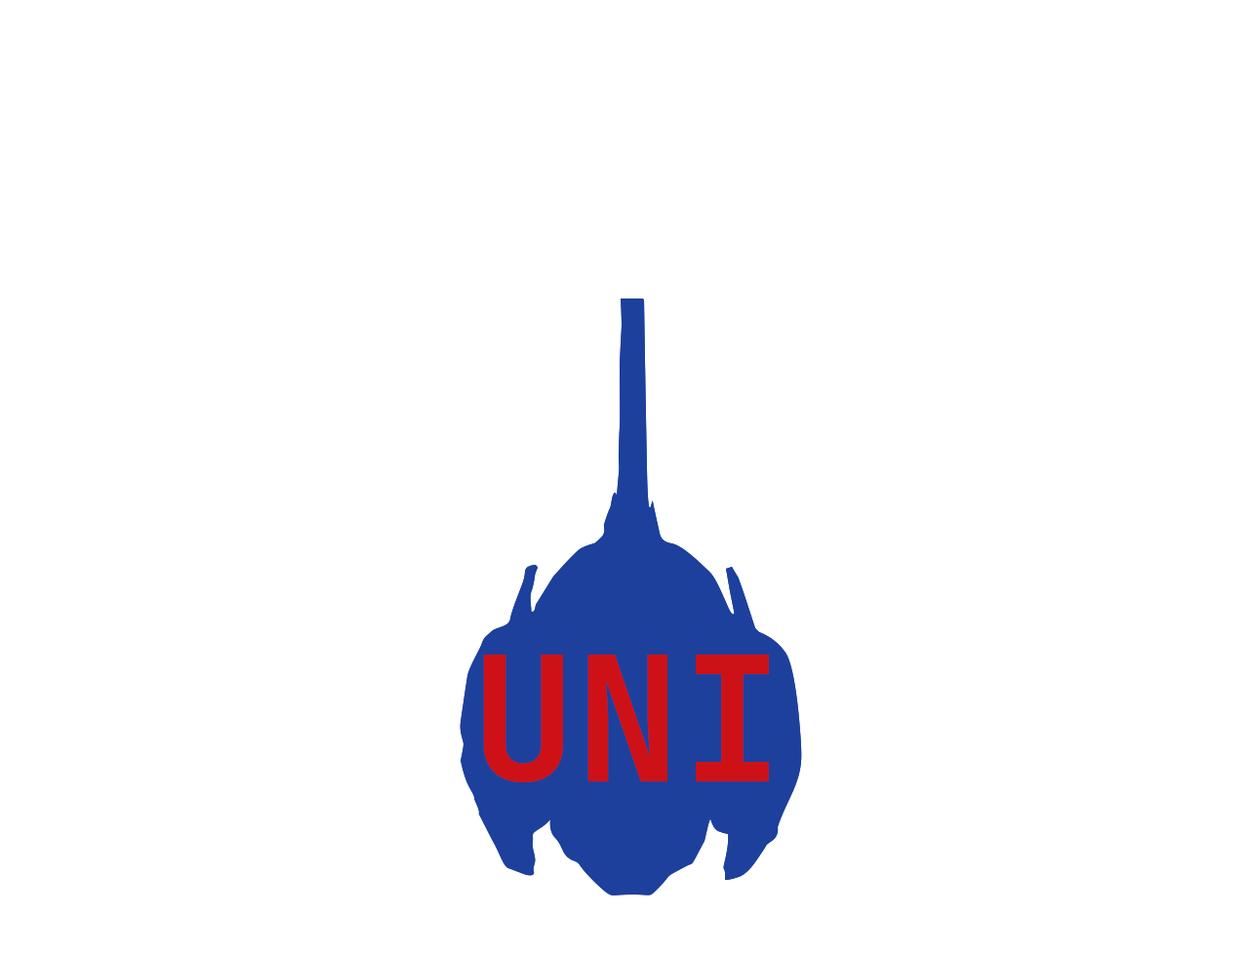
<style>
.page{position:relative;width:1249px;height:955px;background:#ffffff}
.page>*{position:absolute;margin:0}
.t1{font:173.6px "JetBrainsMonoNFM-Bold";color:#ce1117}
</style>
<div class="page">
<p class="t1" style="left:483px;top:655px;width:286px;height:127px">UNI</p>
</div>
